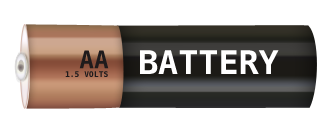
<style>
.page{position:relative;width:325px;height:135px;background:#ffffff}
.page>*{position:absolute;margin:0}
.t1{font:24.3px "Menlo-Bold";color:#1f1b1c}
.t2{font:32.5px "Menlo-Bold";color:#ffffff}
.t3{font:8px "Menlo-Bold";color:#1f1b1c}
</style>
<div class="page">
<p class="t1" style="left:79px;top:50px;width:30px;height:19px">AA</p>
<p class="t2" style="left:140px;top:50px;width:139px;height:24px">BATTERY</p>
<p class="t3" style="left:65px;top:71px;width:43px;height:6px">1.5 VOLTS</p>
</div>
